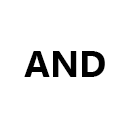
<style>
.page{position:relative;width:128px;height:128px;background:#ffffff}
.page>*{position:absolute;margin:0}
.t1{font:36.9px "Gadugi-Bold";color:#000000}
</style>
<div class="page">
<p class="t1" style="left:24px;top:51px;width:81px;height:26px">AND</p>
</div>
